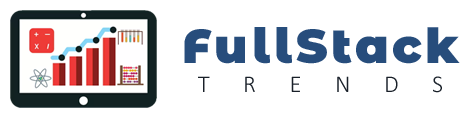
<style>
.page{position:relative;width:473px;height:118px;background:#ffffff}
.page>*{position:absolute;margin:0}
.t1{font:48px "MontserratAlternates-Black";letter-spacing:0.075em;color:#274d7c}
.t2{font:24px "Calibri-Light";letter-spacing:1.4em;color:#192029}
</style>
<div class="page">
<p class="t1" style="left:184px;top:27px;width:276px;height:66px;text-align:center">FullStack<br><span class="t2">TRENDS</span></p>
</div>
